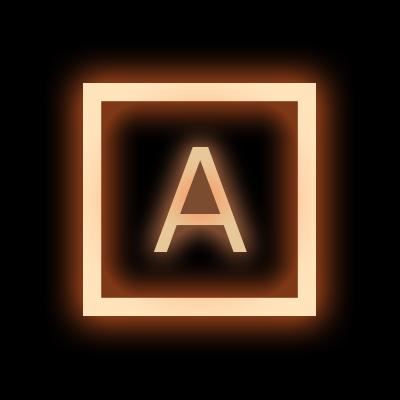
<style>
.page{position:relative;width:400px;height:400px;background:#000000}
.page>*{position:absolute;margin:0}
.t1{font:150px "Purista";color:#e8c798}
</style>
<div class="page">
<p class="t1" style="left:154px;top:147px;width:93px;height:105px">A</p>
</div>
